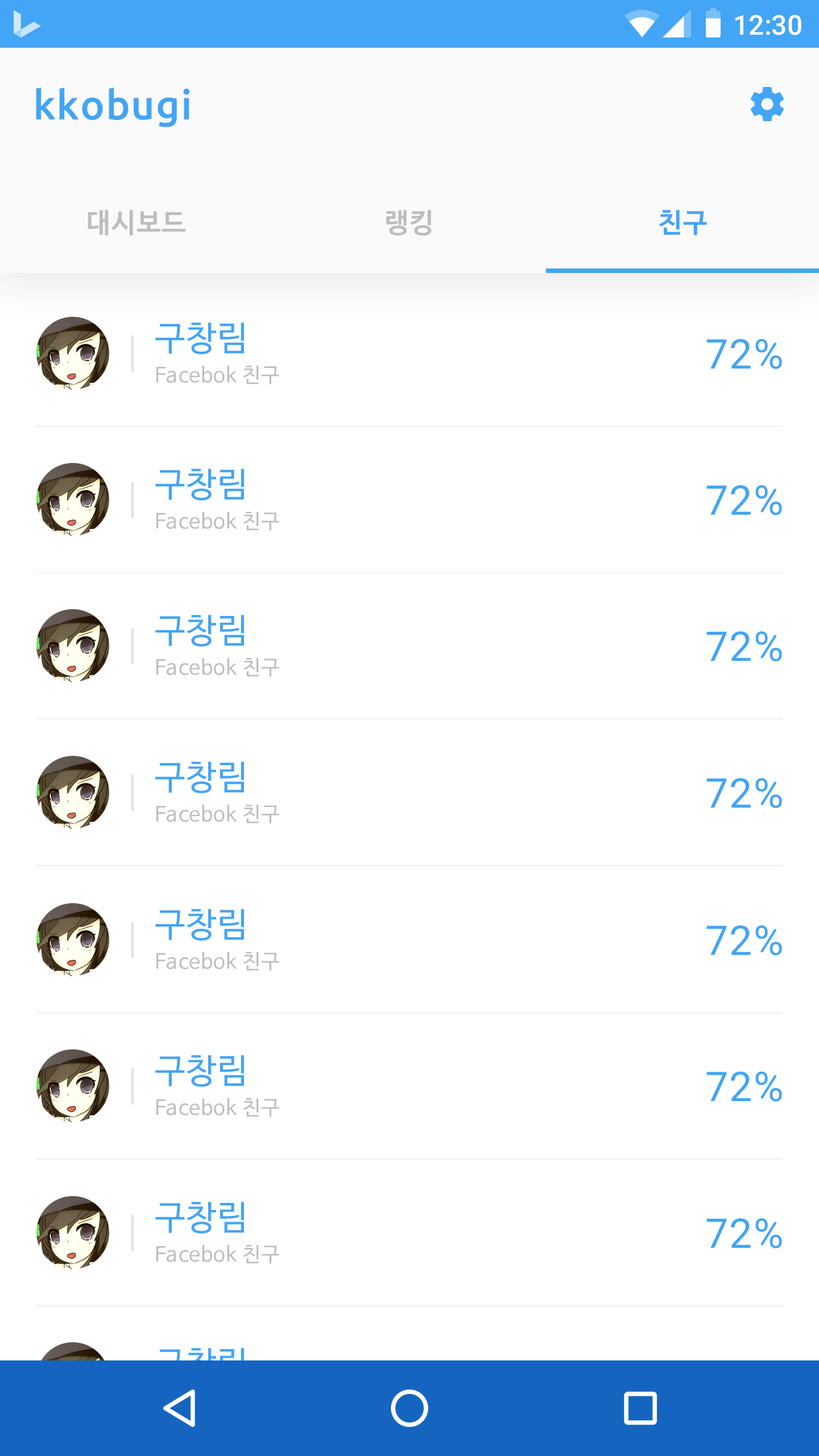
<style>
.page{position:relative;width:819px;height:1456px;background:#ffffff}
.page>*{position:absolute;margin:0}
.t1{font:27.3px "Roboto-Medium";color:#ffffff}
.t2{font:40.9px "Ubuntu-Medium";letter-spacing:0.025em;color:#42a5f5}
.t3{font:27.3px "NanumBarunGothicBold";letter-spacing:0.025em;color:#bdbdbd}
.t4{font:27.3px "NanumBarunGothicBold";letter-spacing:0.025em;color:#42a5f5}
.t5{font:34.1px "NanumBarunGothic";letter-spacing:0.025em;color:#42a5f5}
.t6{font:40.9px "Roboto-Regular";letter-spacing:0.025em;color:#42a5f5}
.t7{font:20.5px "NanumBarunGothic";letter-spacing:0.025em;color:#bdbdbd}
</style>
<div class="page">
<p class="t1" style="left:735px;top:15px;width:66px;height:20px">12:30</p>
<p class="t2" style="left:36px;top:88px;width:154px;height:39px">kkobugi</p>
<p class="t3" style="left:88px;top:210px;width:97px;height:25px">대시보드</p>
<p class="t3" style="left:386px;top:210px;width:46px;height:26px">랭킹</p>
<p class="t4" style="left:659px;top:210px;width:48px;height:25px">친구</p>
<p class="t5" style="left:155px;top:322px;width:89px;height:32px">구창림</p>
<p class="t6" style="left:706px;top:339px;width:76px;height:30px">72%</p>
<p class="t7" style="left:156px;top:366px;width:123px;height:18px">Facebok 친구</p>
<p class="t5" style="left:155px;top:469px;width:89px;height:31px">구창림</p>
<p class="t6" style="left:706px;top:485px;width:76px;height:30px">72%</p>
<p class="t7" style="left:156px;top:512px;width:123px;height:19px">Facebok 친구</p>
<p class="t5" style="left:155px;top:615px;width:89px;height:32px">구창림</p>
<p class="t6" style="left:706px;top:631px;width:76px;height:30px">72%</p>
<p class="t7" style="left:156px;top:658px;width:123px;height:19px">Facebok 친구</p>
<p class="t5" style="left:155px;top:762px;width:89px;height:31px">구창림</p>
<p class="t6" style="left:706px;top:778px;width:76px;height:30px">72%</p>
<p class="t7" style="left:156px;top:805px;width:123px;height:19px">Facebok 친구</p>
<p class="t5" style="left:155px;top:909px;width:89px;height:32px">구창림</p>
<p class="t6" style="left:706px;top:925px;width:76px;height:30px">72%</p>
<p class="t7" style="left:156px;top:952px;width:123px;height:19px">Facebok 친구</p>
<p class="t5" style="left:155px;top:1055px;width:89px;height:32px">구창림</p>
<p class="t6" style="left:706px;top:1072px;width:76px;height:30px">72%</p>
<p class="t7" style="left:156px;top:1098px;width:123px;height:19px">Facebok 친구</p>
<p class="t5" style="left:155px;top:1202px;width:89px;height:32px">구창림</p>
<p class="t6" style="left:706px;top:1218px;width:76px;height:30px">72%</p>
<p class="t7" style="left:156px;top:1245px;width:123px;height:19px">Facebok 친구</p>
</div>
